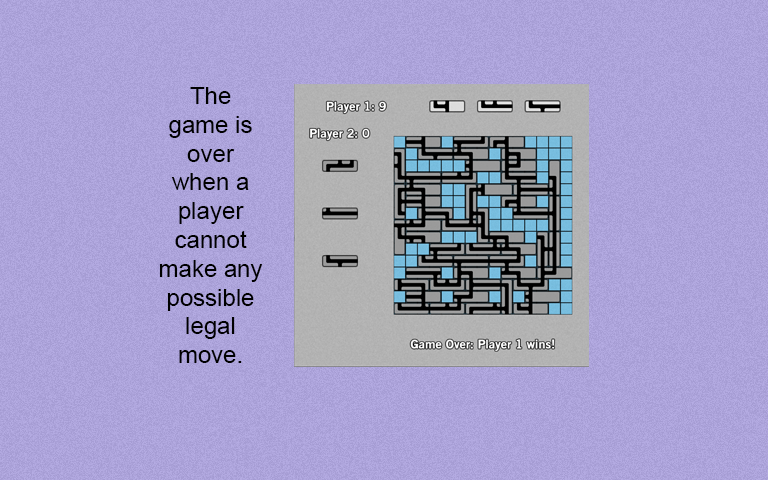
<style>
.page{position:relative;width:768px;height:480px}
.page>*{position:absolute;margin:0}
.t1{font:24px "ArialMT";color:#000000}
</style>
<div class="page">
<p class="t1" style="left:159px;top:87px;width:104px;height:276px;text-align:center">The<br>game is<br>over<br>when a<br>player<br>cannot<br>make any<br>possible<br>legal<br>move.</p>
</div>
